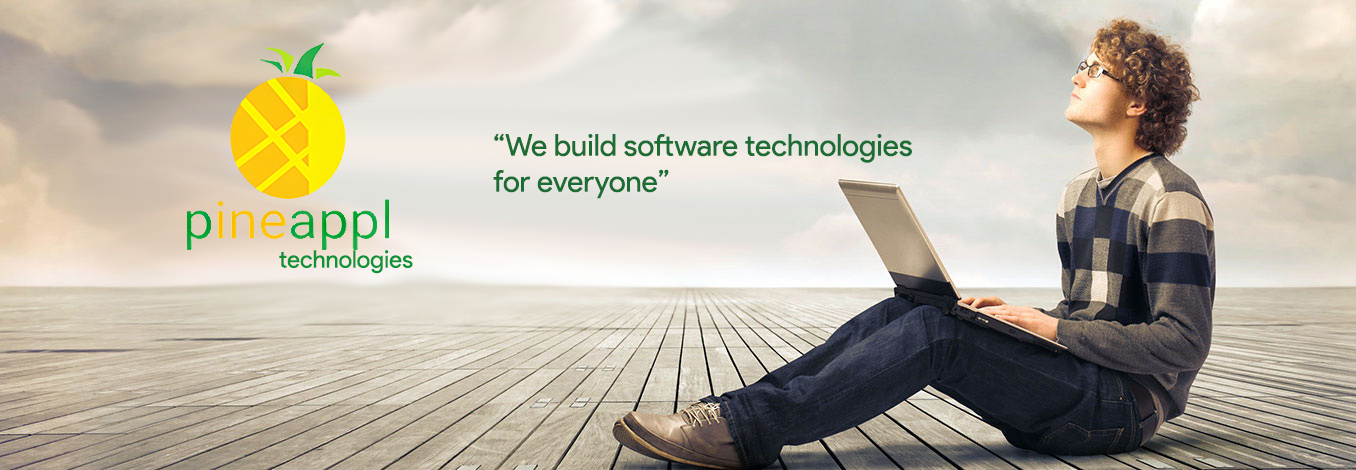
<style>
.page{position:relative;width:1356px;height:470px}
.page>*{position:absolute;margin:0}
.t1{font:30px "ProductSans-Regular";color:#1c6d34}
.t2{font:24px "ProductSans-Regular";color:#0f9337}
</style>
<div class="page">
<p class="t1" style="left:493px;top:133px;width:419px;height:66px">“We build software technologies <br>for everyone”</p>
<p class="t2" style="left:279px;top:250px;width:134px;height:24px">technologies</p>
</div>
